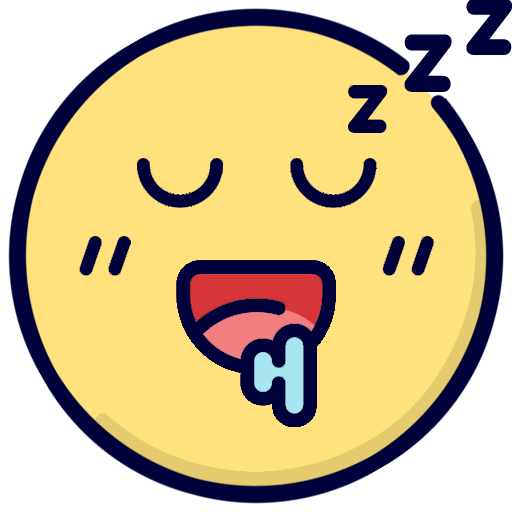
<style>
.page{position:relative;width:512px;height:512px;background:#ffe17d}
.page>*{position:absolute;margin:0}
.t1{font:93.3px "Junegull";color:#00003a}
.t2{font:96px "Junegull";color:#00003a}
.t3{font:80px "Junegull";color:#00003a}
</style>
<div class="page">
<p class="t1" style="left:466px;top:0px;width:47px;height:55px">z</p>
<p class="t2" style="left:404px;top:34px;width:48px;height:58px">z</p>
<p class="t3" style="left:348px;top:85px;width:40px;height:48px">z</p>
</div>
